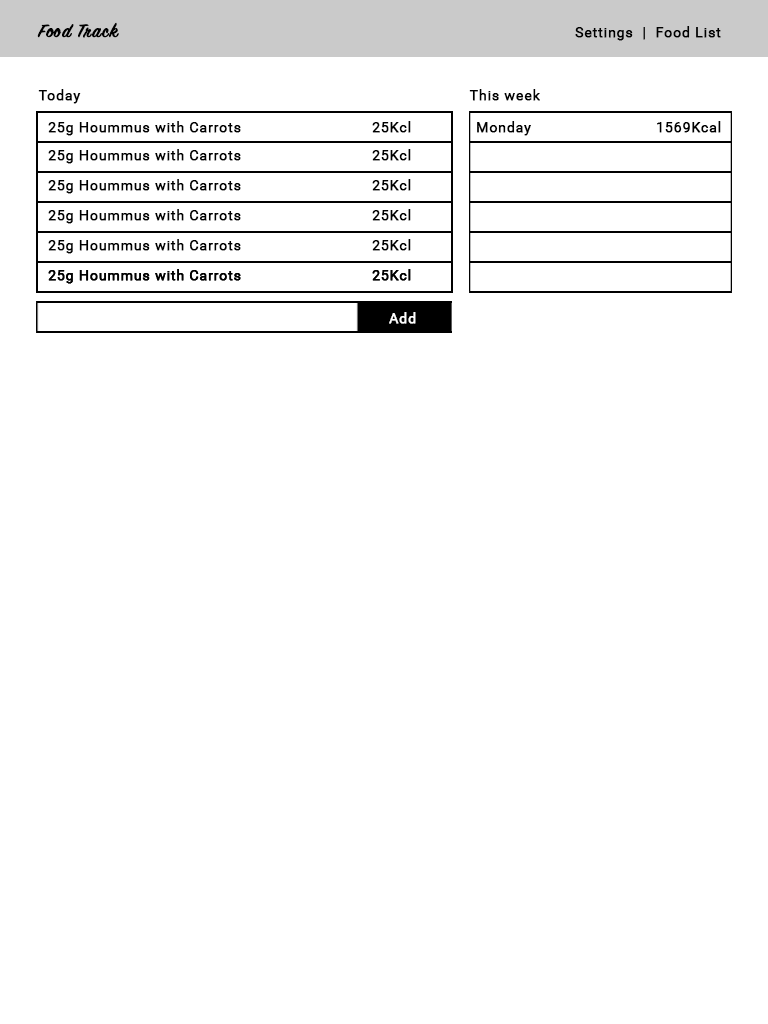
<style>
.page{position:relative;width:768px;height:1024px;background:#ffffff}
.page>*{position:absolute;margin:0}
.t1{font:20.5px "SignPainter-HouseScript";letter-spacing:0.04em;color:#000000;font-weight:bold}
.t2{font:14px "Roboto-Regular";letter-spacing:0.04em;color:#000000;font-weight:bold}
.t3{font:14px "Roboto-Regular";letter-spacing:0.04em;color:#ffffff;font-weight:bold}
</style>
<div class="page">
<p class="t1" style="left:37px;top:22px;width:82px;height:16px">Food Track</p>
<p class="t2" style="left:575px;top:26px;width:146px;height:15px">Settings  |  Food List</p>
<p class="t2" style="left:38px;top:89px;width:43px;height:15px">Today</p>
<p class="t2" style="left:469px;top:89px;width:71px;height:12px">This week</p>
<p class="t2" style="left:48px;top:121px;width:363px;height:15px">25g Hoummus with Carrots     25Kcl</p>
<p class="t2" style="left:477px;top:121px;width:244px;height:15px">Monday     1569Kcal</p>
<p class="t2" style="left:48px;top:149px;width:363px;height:15px">25g Hoummus with Carrots     25Kcl</p>
<p class="t2" style="left:48px;top:179px;width:363px;height:15px">25g Hoummus with Carrots     25Kcl</p>
<p class="t2" style="left:48px;top:209px;width:363px;height:15px">25g Hoummus with Carrots     25Kcl</p>
<p class="t2" style="left:48px;top:239px;width:363px;height:15px">25g Hoummus with Carrots     25Kcl</p>
<p class="t2" style="left:48px;top:269px;width:363px;height:15px">25g Hoummus with Carrots     25Kcl</p>
<p class="t2" style="left:48px;top:269px;width:363px;height:15px">25g Hoummus with Carrots     25Kcl</p>
<p class="t3" style="left:389px;top:312px;width:27px;height:12px">Add</p>
</div>
